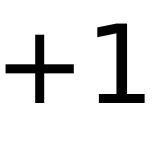
<style>
.page{position:relative;width:155px;height:155px;background:#ffffff}
.page>*{position:absolute;margin:0}
.t1{font:109px "DejaVuSans";color:#000000}
</style>
<div class="page">
<p class="t1" style="left:5px;top:23px;width:140px;height:80px">+1</p>
</div>
